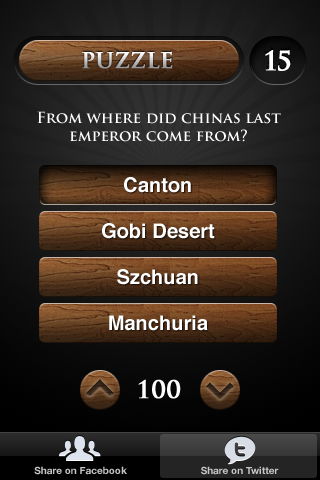
<style>
.page{position:relative;width:320px;height:480px}
.page>*{position:absolute;margin:0}
.t1{font:21.5px "TrajanPro-Bold";font-weight:bold}
.t2{font:26px "TrajanPro-Bold";letter-spacing:-0.1em;color:#ffffff;font-weight:bold}
.t3{font:15px "TrajanPro-Bold";color:#ffffff}
.t4{font:20px "Helvetica-Bold";color:#ffffff}
.t5{font:24px "TrajanPro-Bold";color:#ffffff;font-weight:bold}
.t6{font:10px "HelveticaNeue-Bold";color:#c6c6c5}
</style>
<div class="page">
<p class="t1" style="left:82px;top:51px;width:91px;height:18px">PUZZLE</p>
<p class="t2" style="left:265px;top:50px;width:26px;height:21px">15</p>
<p class="t3" style="left:37px;top:111px;width:244px;height:31px;text-align:center">From where did chinas last<br>emperor come from?</p>
<p class="t4" style="left:124px;top:177px;width:67px;height:16px">Canton</p>
<p class="t4" style="left:102px;top:223px;width:113px;height:16px">Gobi Desert</p>
<p class="t4" style="left:117px;top:269px;width:81px;height:16px">Szchuan</p>
<p class="t4" style="left:109px;top:315px;width:99px;height:16px">Manchuria</p>
<p class="t5" style="left:138px;top:379px;width:43px;height:20px">100</p>
<p class="t6" style="left:34px;top:466px;width:93px;height:9px">Share on Facebook</p>
<p class="t6" style="left:201px;top:466px;width:78px;height:9px">Share on Twitter</p>
</div>
